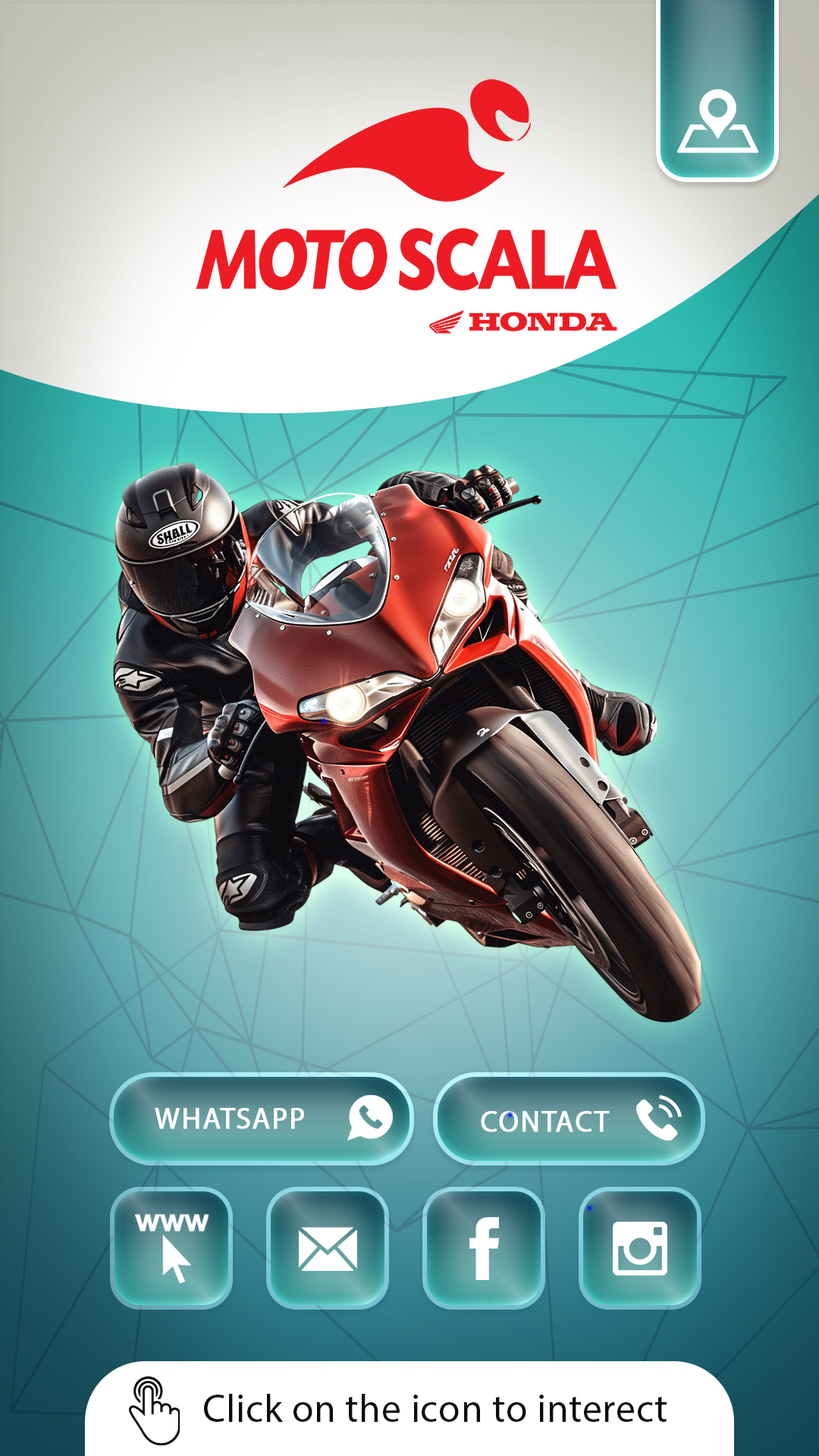
<style>
.page{position:relative;width:819px;height:1456px}
.page>*{position:absolute;margin:0}
.t1{font:29.3px "MyriadPro-Regular";letter-spacing:0.03em;color:#ffffff;text-transform:uppercase;font-weight:bold}
.t2{font:39.4px "MyriadPro-Regular";letter-spacing:0.015em;color:#000000}
</style>
<div class="page">
<p class="t1" style="left:155px;top:1108px;width:149px;height:21px">whatsapp</p>
<p class="t1" style="left:481px;top:1111px;width:129px;height:21px">CONTACT</p>
<p class="t2" style="left:204px;top:1394px;width:463px;height:28px">Click on the icon to interect</p>
</div>
